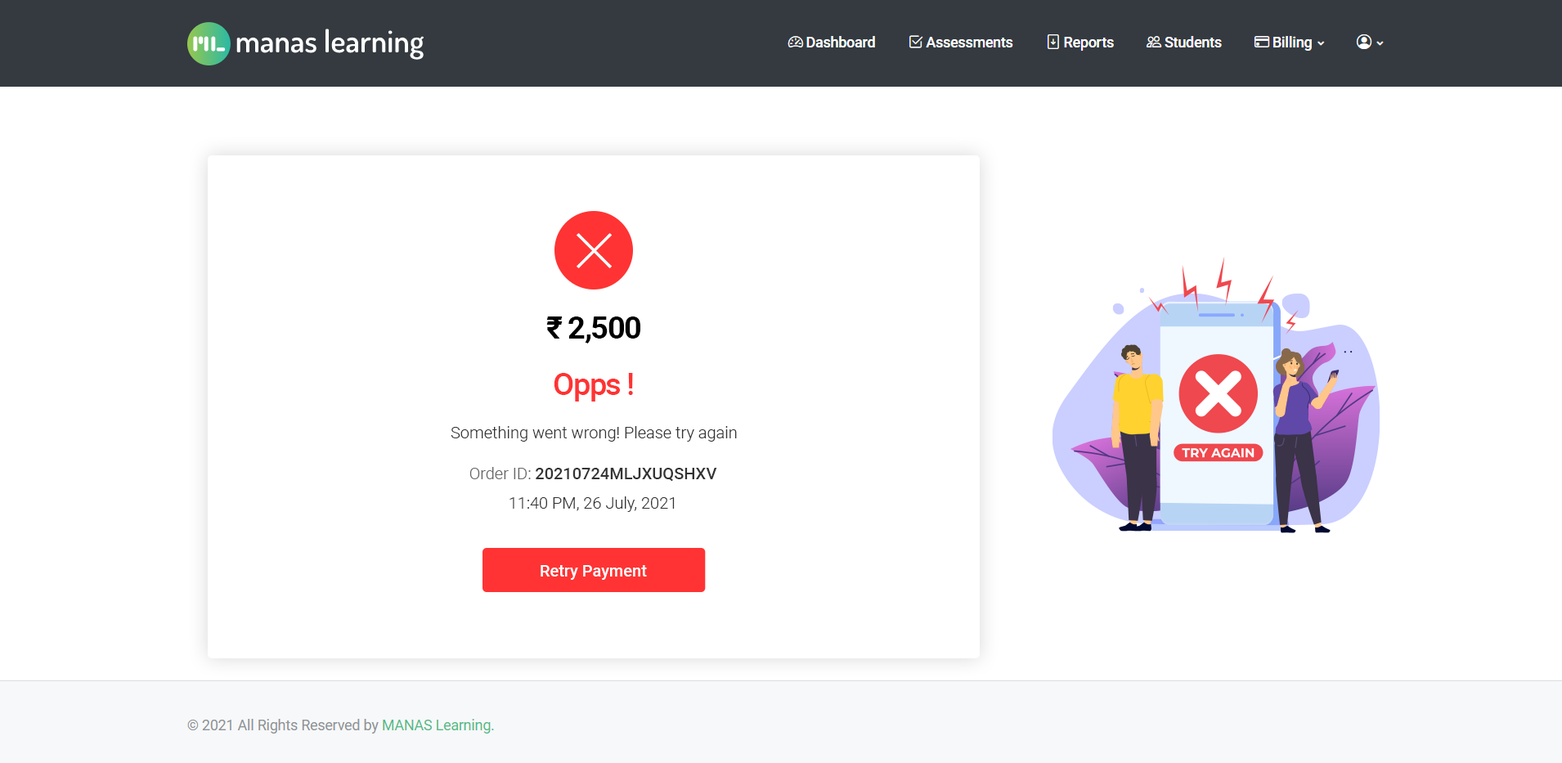
<style>
.page{position:relative;width:1562px;height:763px;background:#ffffff}
.page>*{position:absolute;margin:0}
.t1{font:31.1px "Roboto-Bold";letter-spacing:-0.04em;color:#000000}
.t2{font:31.1px "Roboto-Medium";letter-spacing:-0.04em;color:#ff3333}
.t3{font:16.4px "Roboto-Light";color:#333333}
.t4{font:16.4px/29.4px "Roboto-Light";color:#333333}
.t5{font:16.4px/29.4px "Roboto-Light";color:#666666}
.t6{font:16.4px/29.4px "Roboto-Medium";color:#333333}
.t7{font:16.4px "Roboto-Medium";color:#ffffff}
</style>
<div class="page">
<p class="t1" style="left:546px;top:317px;width:95px;height:27px">₹ 2,500</p>
<p class="t2" style="left:554px;top:373px;width:79px;height:29px">Opps !</p>
<p class="t3" style="left:451px;top:426px;width:286px;height:16px">Something went wrong! Please try again</p>
<p class="t4" style="left:470px;top:467px;width:247px;height:45px;text-align:center"><span class="t5">Order ID: </span><span class="t6">20210724MLJXUQSHXV<br></span>11:40 PM, 26 July, 2021</p>
<p class="t7" style="left:541px;top:565px;width:106px;height:15px">Retry Payment</p>
</div>
